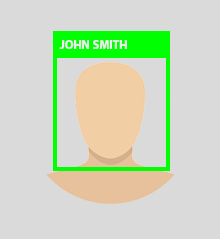
<style>
.page{position:relative;width:220px;height:239px;background:#dadada}
.page>*{position:absolute;margin:0}
.t1{font:12px "MyriadHebrew-Bold";color:#ececec}
</style>
<div class="page">
<p class="t1" style="left:59px;top:40px;width:68px;height:9px">JOHN SMITH</p>
</div>
